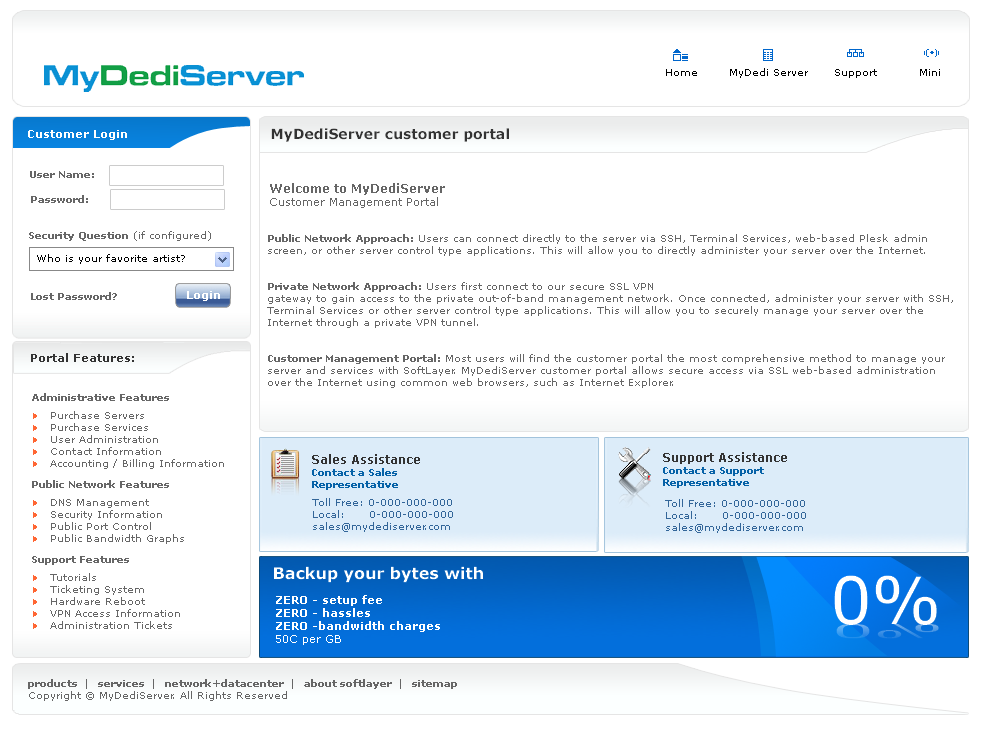
<style>
.page{position:relative;width:984px;height:729px;background:#ffffff}
.page>*{position:absolute;margin:0}
.t1{font:10px "Verdana";color:#000000}
.t2{font:11px "Verdana-Bold";color:#ffffff}
.t3{font:14px "Verdana-Bold";color:#333333}
.t4{font:10px "Verdana-Bold";color:#666666}
.t5{font:11px "Verdana";color:#666666}
.t6{font:12px "Verdana-Bold";color:#666666}
.t7{font:10px "Verdana";color:#666666}
.t8{font:11px "Verdana-Bold";color:#333333}
.t9{font:10px "Verdana";color:#999999}
.t10{font:10px/9px "Verdana-Bold";color:#666666}
.t11{font:10px/9px "Wingdings3";color:#ff6633}
.t12{font:10px/9px "Verdana";color:#666666}
.t13{font:10px "Wingdings3";color:#ff6633}
.t14{font:10px "Verdana-Bold";color:#0762a7}
.t15{font:12px "Verdana-Bold";color:#333333}
.t16{font:10px "Verdana";color:#336699}
.t17{font:16px "Verdana-Bold";color:#ffffff}
.t18{font:65.4px "Verdana";color:#ffffff}
.t19{font:11px "Verdana";color:#ffffff}
.t20{font:19.4px "Verdana";scale:3.37 1}
</style>
<div class="page">
<p class="t1" style="left:666px;top:69px;width:31px;height:7px">Home</p>
<p class="t1" style="left:730px;top:68px;width:78px;height:10px">MyDedi Server</p>
<p class="t1" style="left:835px;top:69px;width:42px;height:9px">Support</p>
<p class="t1" style="left:920px;top:69px;width:20px;height:7px">Mini</p>
<p class="t2" style="left:28px;top:130px;width:99px;height:10px">Customer Login</p>
<p class="t3" style="left:271px;top:128px;width:238px;height:14px">MyDediServer customer portal</p>
<p class="t4" style="left:30px;top:171px;width:64px;height:7px">User Name:</p>
<p class="t5" style="left:270px;top:183px;width:175px;height:25px"><span class="t6">Welcome to MyDediServer <br></span>Customer Management Portal</p>
<p class="t4" style="left:31px;top:195px;width:57px;height:8px">Password:</p>
<p class="t4" style="left:29px;top:231px;width:182px;height:10px">Security Question<span class="t7"> (if configured)</span></p>
<p class="t7" style="left:267px;top:234px;width:686px;height:154px"><span class="t4">Public Network Approach:</span> Users can connect directly to the server via SSH, Terminal Services, web-based Plesk admin screen, or other server control type applications. This will allow you to directly administer your server over the Internet.<br><br><br><span class="t4">Private Network Approach:</span> Users first connect to our secure SSL VPN<br>gateway to gain access to the private out-of-band management network. Once connected, administer your server with SSH, Terminal Services or other server control type applications. This will allow you to securely manage your server over the Internet through a private VPN tunnel.<br><br><br><span class="t4">Customer Management Portal:</span> Most users will find the customer portal the most comprehensive method to manage your server and services with SoftLayer. MyDediServer customer portal allows secure access via SSL web-based administration over the Internet using common web browsers, such as Internet Explorer.</p>
<p class="t4" style="left:31px;top:292px;width:86px;height:8px">Lost Password?</p>
<p class="t2" style="left:187px;top:291px;width:33px;height:10px">Login</p>
<p class="t8" style="left:31px;top:353px;width:103px;height:9px">Portal Features:</p>
<p class="t7" style="left:32px;top:393px;width:192px;height:236px"><span class="t9"><br></span><span class="t10">Administrative Features<br><br></span><span class="t11"> </span><span class="t12">Purchase Servers<br></span><span class="t13"> </span>Purchase Services<br><span class="t13"> </span>User Administration<br><span class="t13"> </span>Contact Information<br><span class="t13"> </span>Accounting / Billing Information<br><br><span class="t10">Public Network Features<br><br></span><span class="t11"> </span><span class="t12">DNS Management<br></span><span class="t13"> </span>Security Information<br><span class="t13"> </span>Public Port Control<br><span class="t13"> </span>Public Bandwidth Graphs<br><br><span class="t10">Support Features<br><br></span><span class="t11"> </span><span class="t12">Tutorials<br></span><span class="t13"> </span>Ticketing System<br><span class="t13"> </span>Hardware Reboot<br><span class="t13"> </span>VPN Access Information<br><span class="t13"> </span>Administration Tickets</p>
<p class="t14" style="left:312px;top:454px;width:108px;height:36px"><span class="t15">Sales Assistance<br></span>Contact a Sales <br>Representative</p>
<p class="t14" style="left:663px;top:452px;width:124px;height:36px"><span class="t15">Support Assistance<br></span>Contact a Support <br>Representative</p>
<p class="t16" style="left:312px;top:498px;width:141px;height:34px">Toll Free: 0-000-000-000<br>Local:      0-000-000-000<br>sales@mydediserver.com</p>
<p class="t16" style="left:665px;top:499px;width:141px;height:34px">Toll Free: 0-000-000-000<br>Local:      0-000-000-000<br>sales@mydediserver.com</p>
<p class="t17" style="left:274px;top:566px;width:209px;height:17px">Backup your bytes with</p>
<p class="t18" style="left:834px;top:575px;width:103px;height:50px">0%</p>
<p class="t2" style="left:276px;top:595px;width:164px;height:50px">ZERO - setup fee<br>ZERO - hassles <br>ZERO -bandwidth charges <br><span class="t19">50C per GB</span></p>
<p class="t20" style="left:836px;top:623px;width:103px;height:16px">0%</p>
<p class="t4" style="left:28px;top:679px;width:429px;height:22px">products  |   services  |   network+datacenter  |   about softlayer  |   sitemap<br><span class="t7">Copyright © MyDediServer. All Rights Reserved</span></p>
</div>
